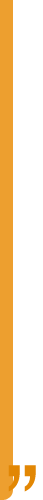
<style>
.page{position:relative;width:43px;height:500px;background:#ffffff}
.page>*{position:absolute;margin:0}
.t1{font:84.4px "GenevaCY";color:#e28704}
</style>
<div class="page">
<p class="t1" style="left:8px;top:465px;width:28px;height:27px;rotate:180deg">“</p>
</div>
